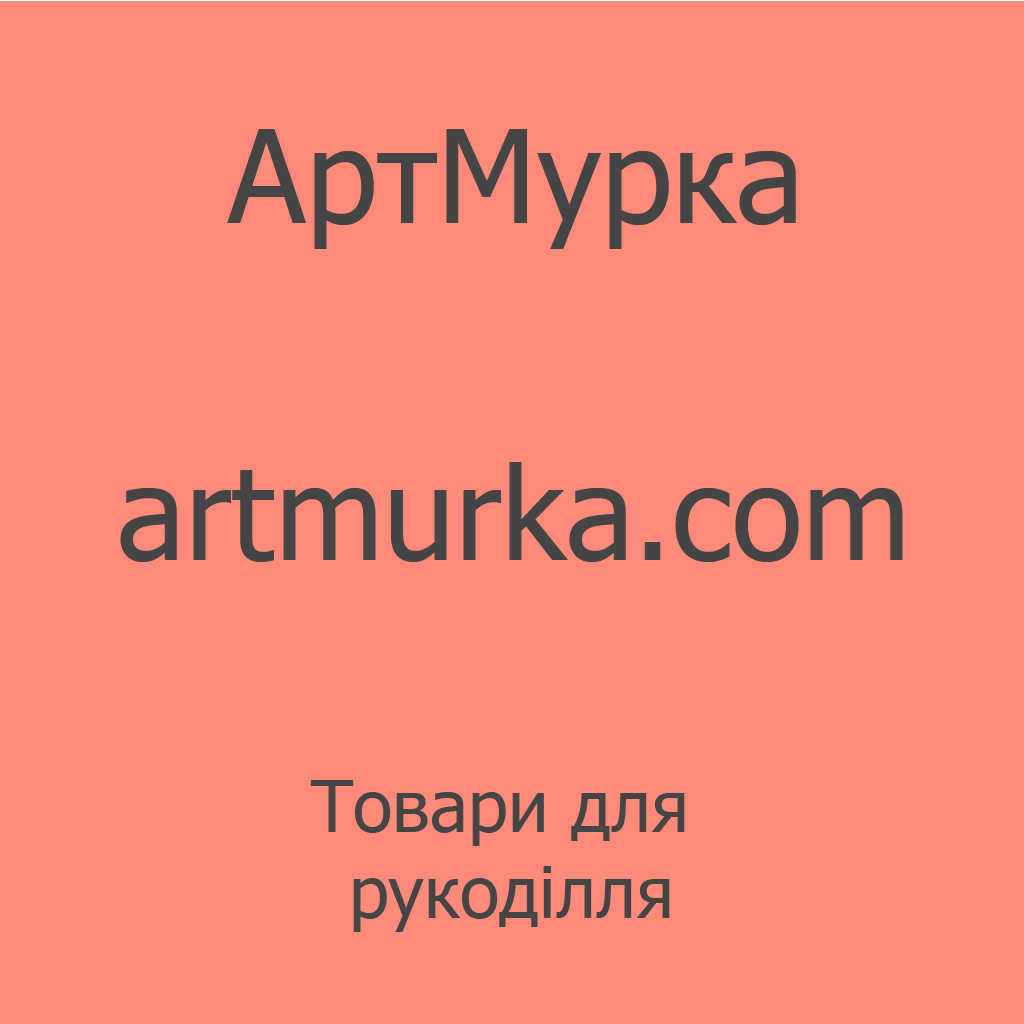
<style>
.page{position:relative;width:1024px;height:1024px;background:#ff8a79}
.page>*{position:absolute;margin:0}
.t1{font:129px "Tahoma";color:#454545}
.t2{font:72px "Tahoma";color:#454545}
</style>
<div class="page">
<p class="t1" style="left:227px;top:129px;width:569px;height:120px">АртМурка</p>
<p class="t1" style="left:120px;top:462px;width:783px;height:100px">artmurka.com</p>
<p class="t2" style="left:310px;top:780px;width:375px;height:152px;text-align:center">Товари для <br>рукоділля</p>
</div>
